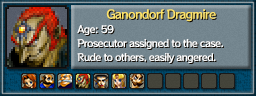
<style>
.page{position:relative;width:256px;height:96px}
.page>*{position:absolute;margin:0}
.t1{font:12px "RocknRollOne-Regular";letter-spacing:-0.075em;color:#fde36b}
.t2{font:10px/14px "RocknRollOne-Regular";letter-spacing:-0.075em;color:#ffffff}
</style>
<div class="page">
<p class="t1" style="left:106px;top:9px;width:110px;height:13px">Ganondorf Dragmire</p>
<p class="t2" style="left:77px;top:25px;width:146px;height:38px">Age: 59<br>Prosecutor assigned to the case.<br>Rude to others, easily angered.</p>
</div>
